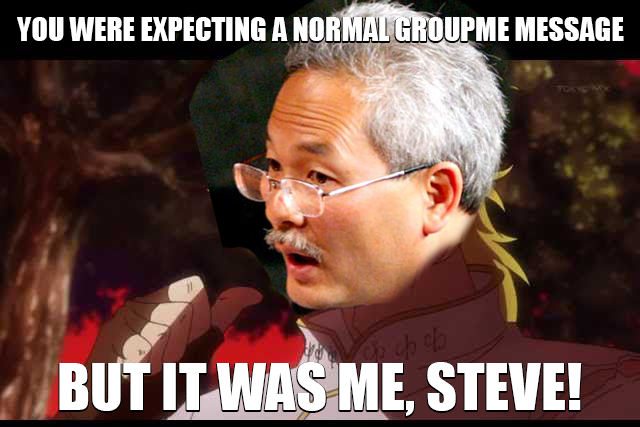
<style>
.page{position:relative;width:640px;height:427px}
.page>*{position:absolute;margin:0}
.t1{font:30px "Impact";color:#ffffff}
.t2{font:60px "Impact";color:#ffffff}
</style>
<div class="page">
<p class="t1" style="left:17px;top:17px;width:607px;height:24px">YOU WERE EXPECTING A NORMAL GROUPME MESSAGE</p>
<p class="t2" style="left:59px;top:362px;width:523px;height:54px">BUT IT WAS ME, STEVE!</p>
</div>
